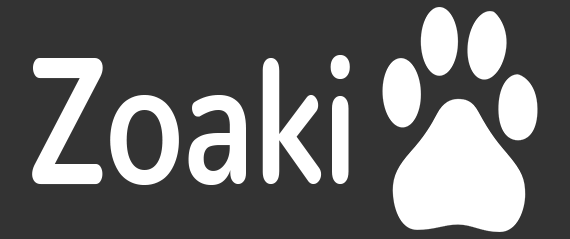
<style>
.page{position:relative;width:570px;height:239px;background:#333333}
.page>*{position:absolute;margin:0}
.t1{font:178px "Nunito-Bold";color:#ffffff;scale:0.75 1}
</style>
<div class="page">
<p class="t1" style="left:32px;top:55px;width:318px;height:130px">Zoaki</p>
</div>
